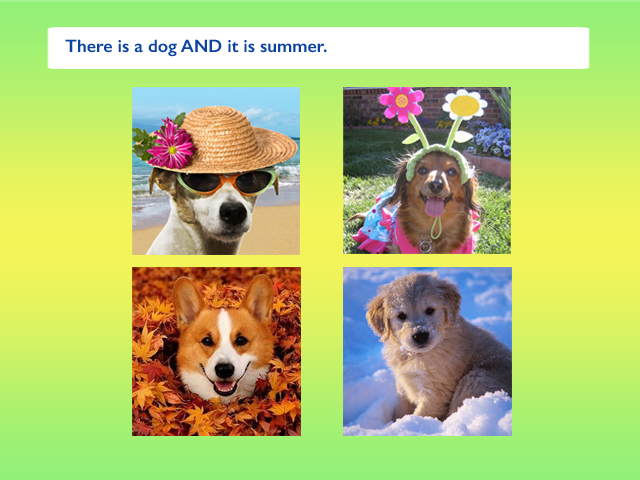
<style>
.page{position:relative;width:640px;height:480px}
.page>*{position:absolute;margin:0}
.t1{font:18px "GillSans-SemiBold";color:#0c449f}
</style>
<div class="page">
<p class="t1" style="left:65px;top:39px;width:262px;height:18px">There is a dog AND it is summer.</p>
</div>
